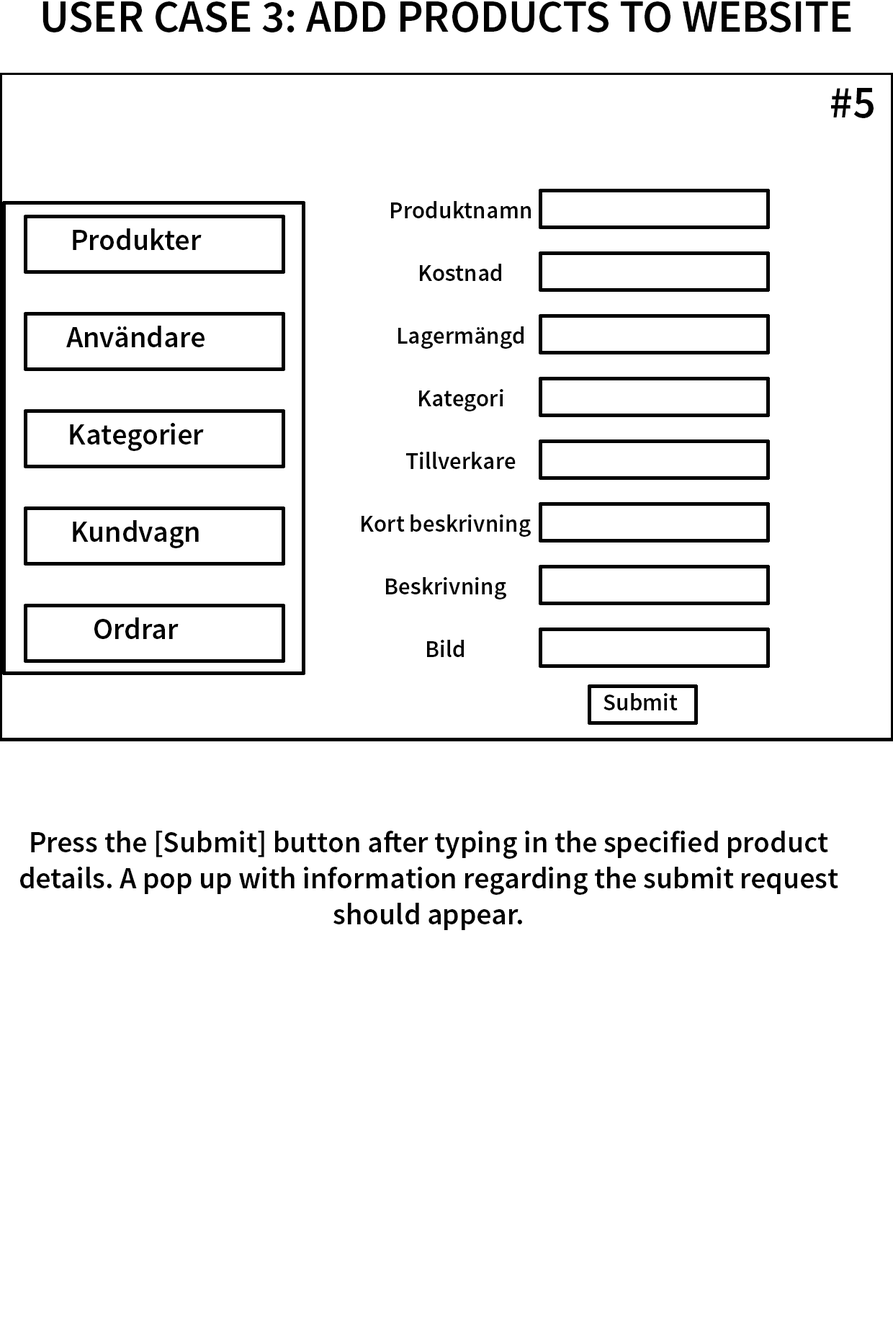
<style>
.page{position:relative;width:893px;height:1335px;background:#ffffff}
.page>*{position:absolute;margin:0}
.t1{font:45px "SourceSansPro-Semibold";color:#000000}
.t2{font:24px "SourceSansPro-Semibold";color:#000000}
.t3{font:30px "SourceSansPro-Semibold";color:#000000}
</style>
<div class="page">
<p class="t1" style="left:43px;top:1px;width:809px;height:31px">USER CASE 3: ADD PRODUCTS TO WEBSITE</p>
<p class="t1" style="left:831px;top:88px;width:43px;height:30px">#5</p>
<p class="t2" style="left:391px;top:201px;width:140px;height:17px">Produktnamn</p>
<p class="t3" style="left:73px;top:228px;width:129px;height:22px">Produkter</p>
<p class="t2" style="left:420px;top:264px;width:81px;height:17px">Kostnad</p>
<p class="t3" style="left:66px;top:326px;width:139px;height:21px">Användare</p>
<p class="t2" style="left:398px;top:326px;width:126px;height:23px">Lagermängd</p>
<p class="t2" style="left:419px;top:389px;width:85px;height:22px">Kategori</p>
<p class="t3" style="left:70px;top:423px;width:134px;height:28px">Kategorier</p>
<p class="t2" style="left:406px;top:452px;width:110px;height:17px">Tillverkare</p>
<p class="t3" style="left:73px;top:520px;width:126px;height:28px">Kundvagn</p>
<p class="t2" style="left:362px;top:514px;width:169px;height:23px">Kort beskrivning</p>
<p class="t2" style="left:386px;top:577px;width:120px;height:22px">Beskrivning</p>
<p class="t3" style="left:94px;top:617px;width:85px;height:22px">Ordrar</p>
<p class="t2" style="left:427px;top:640px;width:37px;height:17px">Bild</p>
<p class="t2" style="left:604px;top:693px;width:74px;height:17px">Submit</p>
<p class="t3" style="left:20px;top:831px;width:819px;height:99px;text-align:center">Press the [Submit] button after typing in the specified product details. A pop up with information regarding the submit request should appear.</p>
</div>
